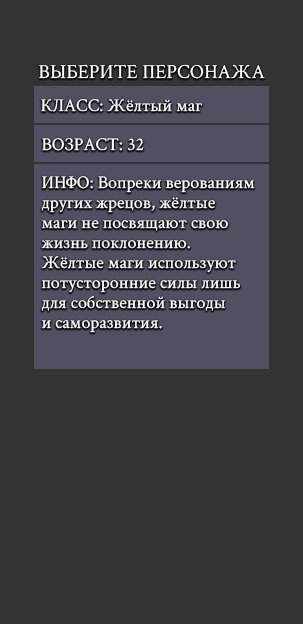
<style>
.page{position:relative;width:303px;height:624px;background:#333333}
.page>*{position:absolute;margin:0}
.t1{font:20px "CrimsonText-Regular";color:#ffffff}
.t2{font:18px "CrimsonText-Regular";color:#ffffff}
.t3{font:18px/20px "CrimsonText-Regular";color:#ffffff}
</style>
<div class="page">
<p class="t1" style="left:39px;top:64px;width:226px;height:15px">ВЫБЕРИТЕ ПЕРСОНАЖА</p>
<p class="t2" style="left:41px;top:99px;width:162px;height:13px">КЛАСС: Жёлтый маг</p>
<p class="t2" style="left:42px;top:138px;width:102px;height:13px">ВОЗРАСТ: 32</p>
<p class="t3" style="left:41px;top:176px;width:214px;height:157px">ИНФО: Вопреки верованиям<br>других жрецов, жёлтые<br>маги не посвящают свою<br>жизнь поклонению.<br>Жёлтые маги используют<br>потусторонние силы лишь<br>для собственной выгоды<br>и саморазвития.</p>
</div>
